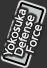
<style>
.page{position:relative;width:47px;height:68px;background:#333333}
.page>*{position:absolute;margin:0}
.t1{font:10px/10px "UDShinGoPro-Light";color:#f7f7f7;font-weight:bold}
</style>
<div class="page">
<p class="t1" style="left:3px;top:9px;width:39px;height:48px;text-align:center;rotate:-72deg">Yokosuka<br>Defense<br>Force</p>
</div>
